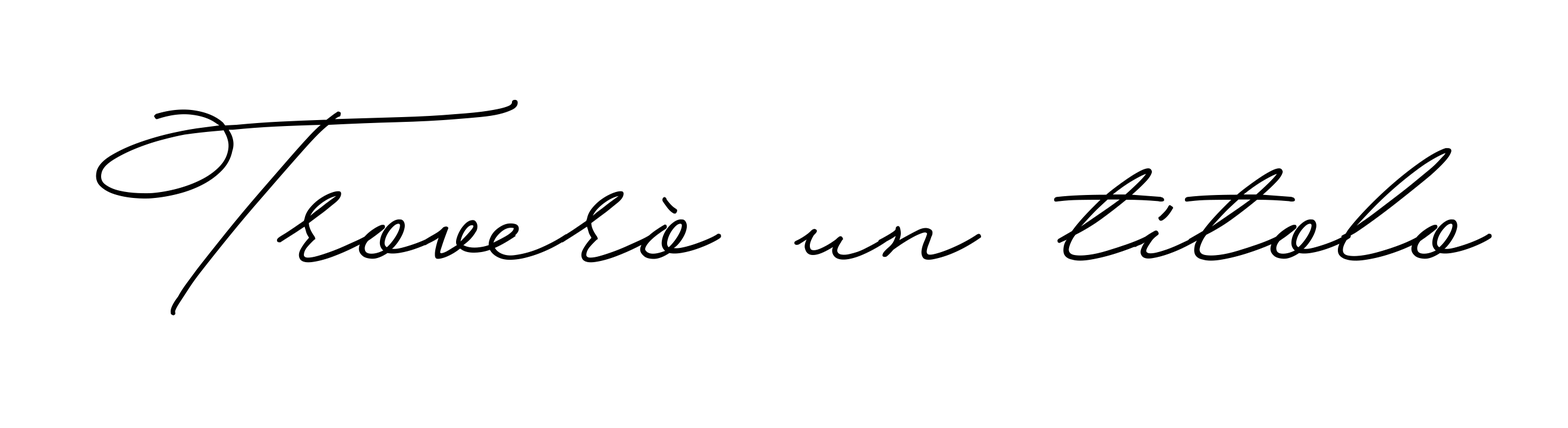
<style>
.page{position:relative;width:1568px;height:428px;background:#ffffff}
.page>*{position:absolute;margin:0}
.t1{font:178.2px "HijrnotesPERSONALUSEONLY";color:#000000}
</style>
<div class="page">
<p class="t1" style="left:96px;top:100px;width:1396px;height:216px">Troverò un titolo</p>
</div>
